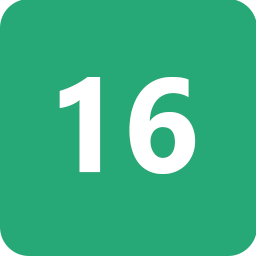
<style>
.page{position:relative;width:256px;height:256px;background:#27a877}
.page>*{position:absolute;margin:0}
.t1{font:133.3px "LeelawadeeUI-Bold";color:#ffffff}
</style>
<div class="page">
<p class="t1" style="left:59px;top:77px;width:137px;height:97px">16</p>
</div>
